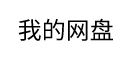
<style>
.page{position:relative;width:126px;height:60px;background:#ffffff}
.page>*{position:absolute;margin:0}
.t1{font:24px "SourceHanSansCN-Regular";color:#000000}
</style>
<div class="page">
<p class="t1" style="left:18px;top:18px;width:95px;height:23px">我的网盘</p>
</div>
